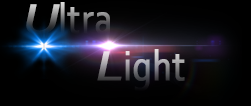
<style>
.page{position:relative;width:251px;height:106px;background:#000000}
.page>*{position:absolute;margin:0}
.t1{font:43.9px "Corbel";font-weight:bold;scale:0.82 1}
.t2{font:43.9px "Corbel";font-weight:bold;font-style:italic;scale:1.23 1}
</style>
<div class="page">
<p class="t1" style="left:26px;top:2px;width:84px;height:32px"><span class="t2">U</span>ltra</p>
<p class="t1" style="left:97px;top:49px;width:88px;height:42px"><span class="t2">L</span>ight</p>
</div>
